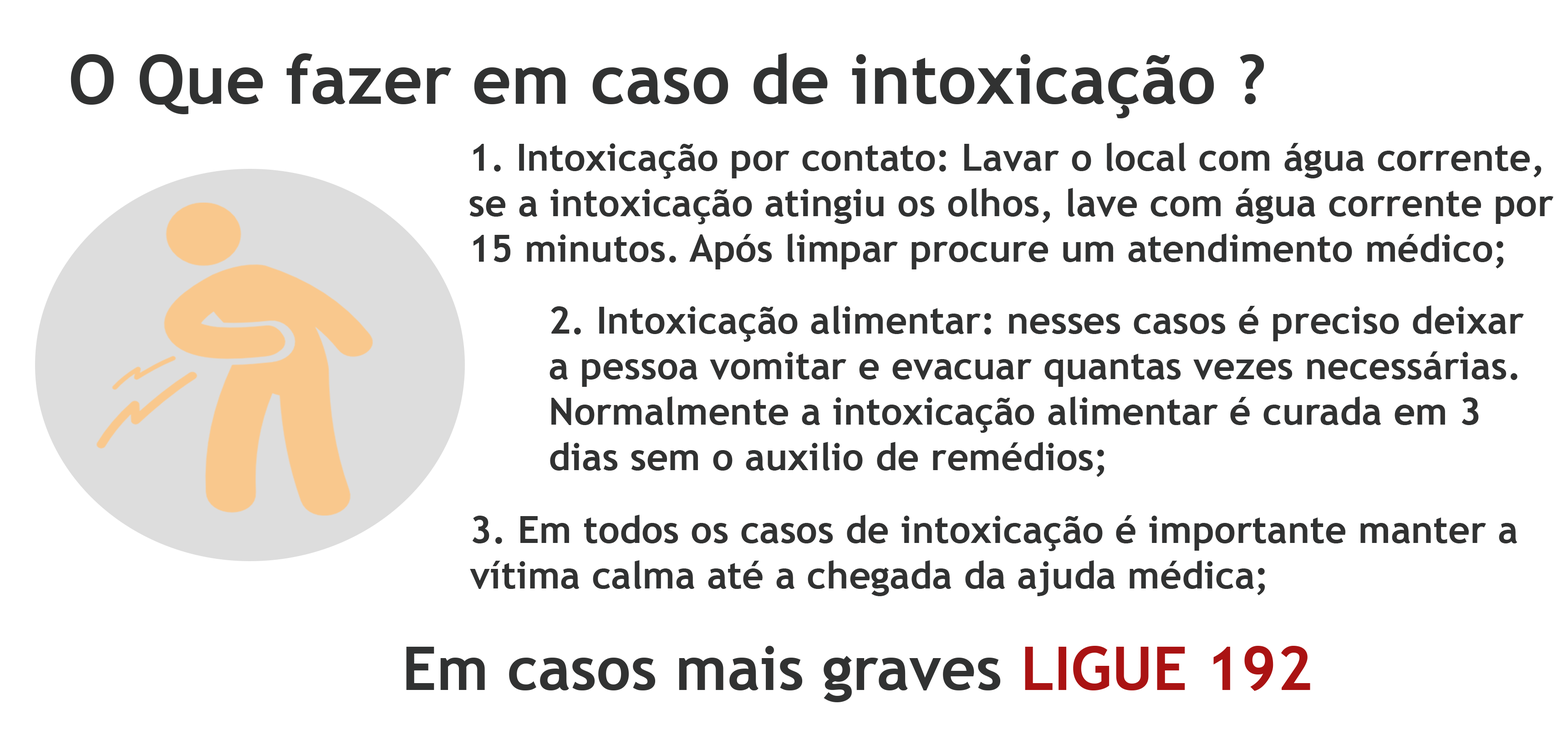
<style>
.page{position:relative;width:1568px;height:730px;background:#ffffff}
.page>*{position:absolute;margin:0}
.t1{font:68.3px "TrebuchetMS-Bold";color:#313232}
.t2{font:37.9px "TrebuchetMS-Bold";color:#313232}
.t3{font:60.7px "TrebuchetMS-Bold";color:#313232}
.t4{font:60.7px "TrebuchetMS-Bold";color:#aa1313}
</style>
<div class="page">
<p class="t1" style="left:71px;top:53px;width:1193px;height:65px">O Que fazer em caso de intoxicação ?</p>
<p class="t2" style="left:469px;top:143px;width:1084px;height:127px">1. Intoxicação por contato: Lavar o local com água corrente,<br>se a intoxicação atingiu os olhos, lave com água corrente por<br>15 minutos. Após limpar procure um atendimento médico;</p>
<p class="t2" style="left:550px;top:305px;width:974px;height:172px">2. Intoxicação alimentar: nesses casos é preciso deixar<br>a pessoa vomitar e evacuar quantas vezes necessárias.<br>Normalmente a intoxicação alimentar é curada em 3 <br>dias sem o auxilio de remédios;</p>
<p class="t2" style="left:470px;top:515px;width:1047px;height:81px">3. Em todos os casos de intoxicação é importante manter a<br>vítima calma até a chegada da ajuda médica;</p>
<p class="t3" style="left:406px;top:646px;width:904px;height:57px">Em casos mais graves<span class="t4"> LIGUE 192</span></p>
</div>
